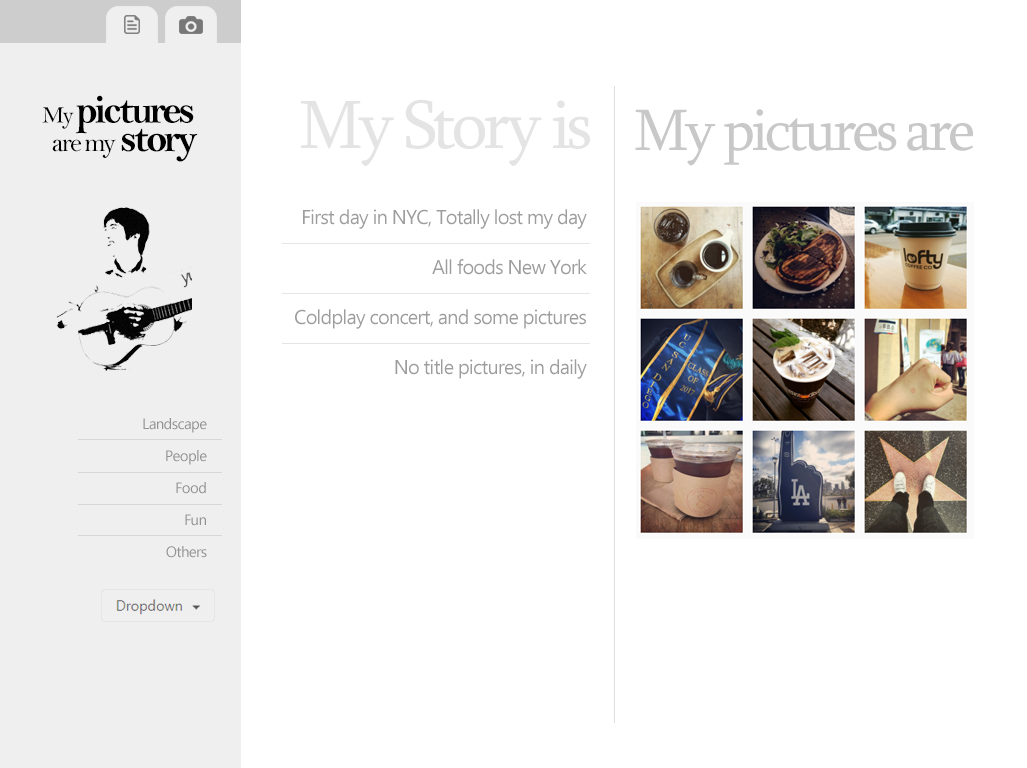
<style>
.page{position:relative;width:1027px;height:768px;background:#ffffff}
.page>*{position:absolute;margin:0}
.t1{font:40px "BellMTBold";letter-spacing:-0.08em;color:#000000}
.t2{font:23.4px "BellMT";letter-spacing:-0.08em;color:#000000}
.t3{font:70px "Sylfaen";letter-spacing:-0.06em;color:#e4e4e4}
.t4{font:60px "Sylfaen";letter-spacing:-0.06em;color:#c4c4c4}
.t5{font:27px "BellMT";letter-spacing:-0.08em;color:#000000}
.t6{font:20px/50px "Ebrima";letter-spacing:-0.04em;color:#9d9d9d}
.t7{font:15px/32px "Ebrima";letter-spacing:-0.04em;color:#929292}
</style>
<div class="page">
<p class="t1" style="left:42px;top:95px;width:152px;height:39px"><span class="t2">My </span>pictures</p>
<p class="t3" style="left:300px;top:99px;width:290px;height:67px">My Story is</p>
<p class="t4" style="left:635px;top:109px;width:338px;height:57px;opacity:0.94">My pictures are</p>
<p class="t5" style="left:52px;top:128px;width:146px;height:34px">are my <span class="t1">story</span></p>
<p class="t6" style="left:295px;top:209px;width:292px;height:170px;text-align:right">First day in NYC, Totally lost my day<br>All foods New York<br>Coldplay concert, and some pictures<br>No title pictures, in daily</p>
<p class="t7" style="left:143px;top:418px;width:64px;height:140px;text-align:right">Landscape<br>People<br>Food<br>Fun<br>Others</p>
</div>
